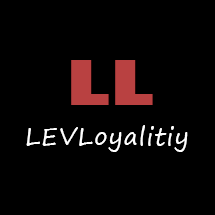
<style>
.page{position:relative;width:215px;height:215px;background:#000000}
.page>*{position:absolute;margin:0}
.t1{font:60px "GillSans-UltraBold";letter-spacing:0.04em;color:#b94141}
.t2{font:24px "SegoePrint";letter-spacing:0.04em;color:#ffffff}
</style>
<div class="page">
<p class="t1" style="left:71px;top:60px;width:82px;height:45px">LL</p>
<p class="t2" style="left:26px;top:125px;width:162px;height:27px">LEVLoyalitiy</p>
</div>
